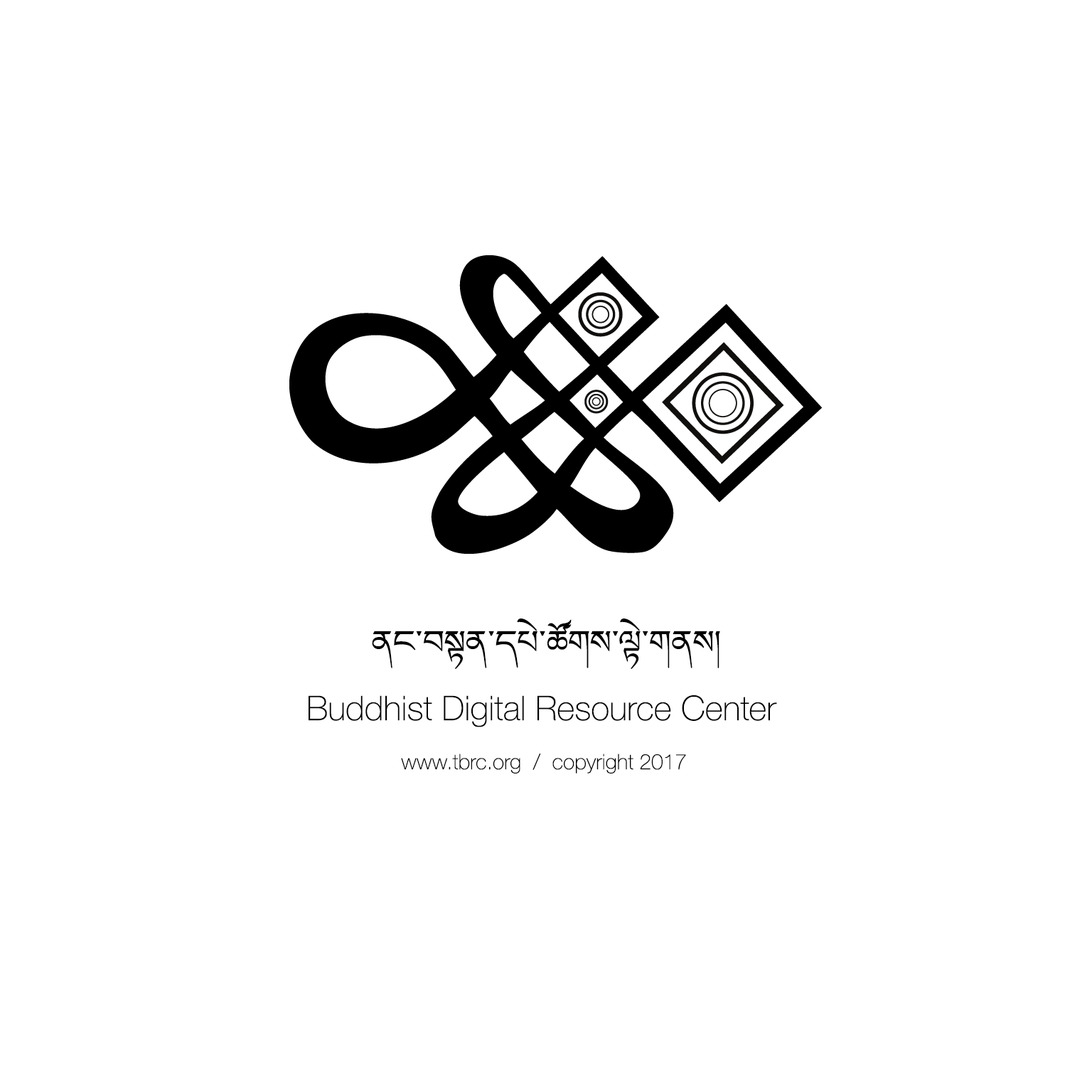
<style>
.page{position:relative;width:1092px;height:1092px;background:#ffffff}
.page>*{position:absolute;margin:0}
.t1{font:51.2px "MicrosoftHimalaya";color:#000000}
.t2{font:34.1px "HelveticaNeue-Thin";color:#000000}
.t3{font:21.3px "HelveticaNeue-Thin";color:#000000}
</style>
<div class="page">
<p class="t1" style="left:372px;top:619px;width:348px;height:50px">ནང་བསྟན་དཔེ་ཚོགས་ལྟེ་གནས།</p>
<p class="t2" style="left:309px;top:695px;width:468px;height:32px">Buddhist Digital Resource Center</p>
<p class="t3" style="left:401px;top:754px;width:285px;height:19px">www.tbrc.org  /  copyright 2017</p>
</div>
